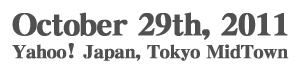
<style>
.page{position:relative;width:301px;height:73px;background:#ffffff}
.page>*{position:absolute;margin:0}
.t1{font:30px "DFLeiGaSo-W9-WINP-RKSJ-H";color:#4f504f;font-weight:bold}
.t2{font:18px "DFLeiGaSo-W9-WINP-RKSJ-H";color:#4f504f;font-weight:bold}
</style>
<div class="page">
<p class="t1" style="left:12px;top:12px;width:276px;height:28px">October 29th, 2011</p>
<p class="t2" style="left:12px;top:43px;width:277px;height:18px">Yahoo! Japan, Tokyo MidTown</p>
</div>
